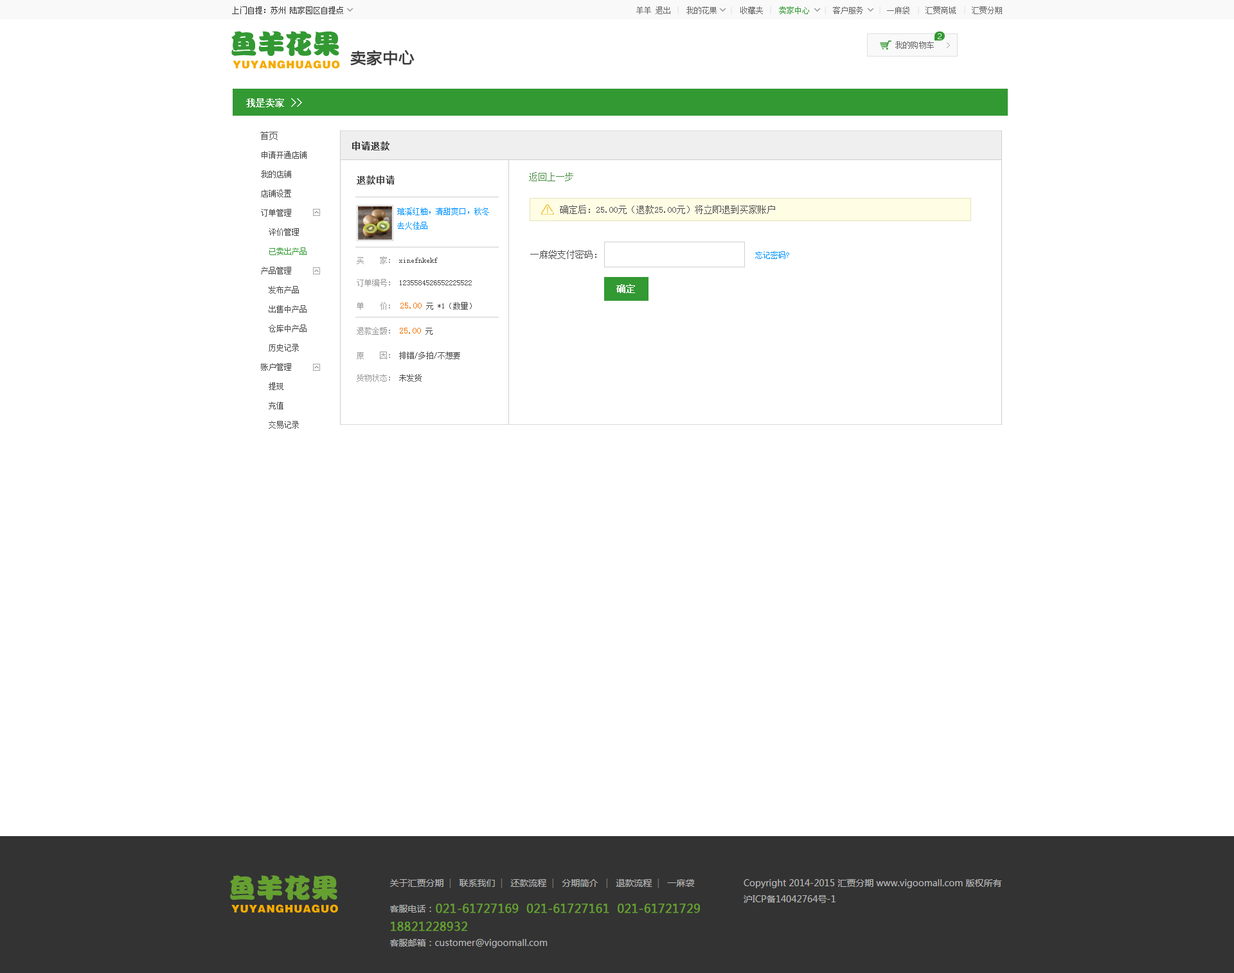
<style>
.page{position:relative;width:1234px;height:973px;background:#ffffff}
.page>*{position:absolute;margin:0}
.t1{font:9px "SimSun";color:#4b4b4b}
.t2{font:9px "SimSun";color:#3e3e3e;font-weight:bold}
.t3{font:7.7px/19.3px "SimSun";color:#4b4b4b}
.t4{font:7.7px/19.3px "SimSun";color:#339933}
.t5{font:9px "SimSun";color:#448b3d}
.t6{font:9px "SimSun";color:#4b4b4b;font-weight:bold}
.t7{font:7.7px/14.1px "SimSun";color:#0094ff}
.t8{font:7.7px/22.5px "SimSun";color:#4b4b4b}
.t9{font:7.7px/22.5px "SimSun";color:#9a9a9a}
.t10{font:7.7px/25.1px "SimSun";color:#9a9a9a}
.t11{font:9px/25.1px "SimSun";color:#ee7000}
.t12{font:7.7px/25.1px "SimSun";color:#4b4b4b}
.t13{font:7.7px "SimSun";color:#0094ff}
.t14{font:9px "SimSun";color:#ffffff;font-weight:bold}
</style>
<div class="page">
<p class="t1" style="left:260px;top:131px;width:18px;height:9px">首页</p>
<p class="t2" style="left:352px;top:141px;width:38px;height:9px">申请退款</p>
<p class="t3" style="left:261px;top:151px;width:46px;height:278px">申请开通店铺<br>我的店铺<br>店铺设置<br>订单管理<br>  评价管理<br>  <span class="t4">已卖出产品<br></span>产品管理<br>  发布产品<br>  出售中产品<br>  仓库中产品<br>  历史记录<br>账户管理<br>  提现<br>  充值<br>  交易记录</p>
<p class="t5" style="left:529px;top:172px;width:44px;height:9px">返回上一步</p>
<p class="t6" style="left:357px;top:176px;width:38px;height:8px">退款申请</p>
<p class="t7" style="left:397px;top:208px;width:92px;height:22px">琯溪红柚，清甜爽口，秋冬<br>去火佳品</p>
<p class="t1" style="left:560px;top:205px;width:215px;height:9px">确定后：25.00元（退款25.00元）将立即退到买家账户</p>
<p class="t8" style="left:357px;top:256px;width:115px;height:126px"><span class="t9">买    家：</span> xinefnkekf<br><span class="t9">订单编号：</span> 1235584526552225522<br><span class="t10">单    价： </span><span class="t11">25.00</span><span class="t12"> 元 *1（数量）<br></span><span class="t10">退款金额： </span><span class="t11">25.00 </span><span class="t12">元<br></span><span class="t9">原    因：</span> 排错/多拍/不想要<br><span class="t9">货物状态：</span> 未发货</p>
<p class="t1" style="left:530px;top:250px;width:259px;height:9px">一麻袋支付密码：                                  <span class="t13">忘记密码?</span></p>
<p class="t14" style="left:616px;top:284px;width:19px;height:9px">确定</p>
</div>
